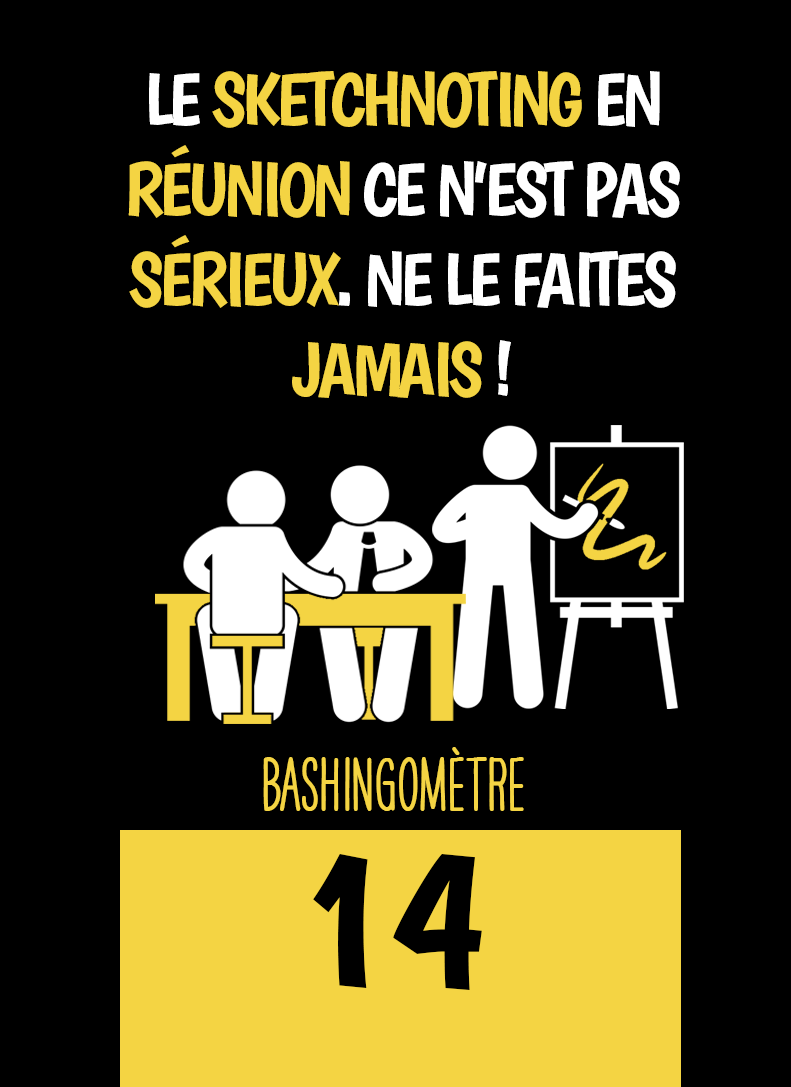
<style>
.page{position:relative;width:791px;height:1087px;background:#000000}
.page>*{position:absolute;margin:0}
.t1{font:75px "Boogaloo-Regular";letter-spacing:-0.06em;color:#ffffff}
.t2{font:75px "Boogaloo-Regular";letter-spacing:-0.06em;color:#f4d443}
.t3{font:66.7px "HAVEANICEDAYTallW04-Bold";color:#f4d443}
.t4{font:200px "Boogaloo-Regular";color:#000000}
</style>
<div class="page">
<p class="t1" style="left:128px;top:71px;width:552px;height:327px;text-align:center">LE <span class="t2">SKETCHNOTING </span>EN <span class="t2">RÉUNION </span>CE N’EST PAS  <span class="t2">SÉRIEUX</span>. NE LE FAITES <span class="t2">JAMAIS </span>!</p>
<p class="t3" style="left:263px;top:747px;width:261px;height:64px">BASHINgomètre</p>
<p class="t4" style="left:313px;top:854px;width:169px;height:136px">14</p>
</div>
